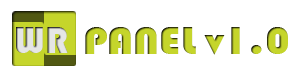
<style>
.page{position:relative;width:300px;height:80px;background:#ffffff}
.page>*{position:absolute;margin:0}
.t1{font:38.8px "Bauhaus93";letter-spacing:0.01em;color:#e5e6e5}
.t2{font:39.7px "Bauhaus93";color:#c5d52b;scale:1.11 1}
</style>
<div class="page">
<p class="t1" style="left:16px;top:27px;width:52px;height:26px">WR</p>
<p class="t2" style="left:85px;top:27px;width:203px;height:28px">PANEL v1.0</p>
</div>
